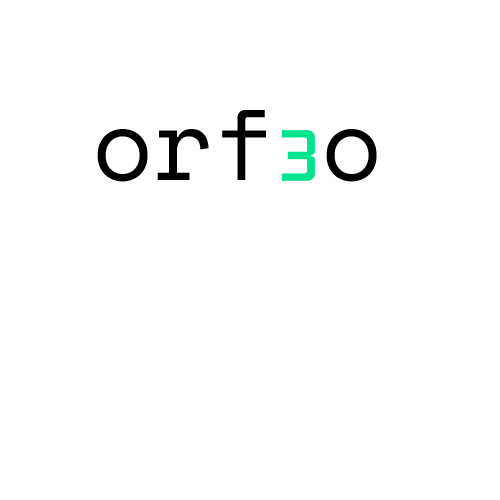
<style>
.page{position:relative;width:500px;height:500px;background:#ffffff}
.page>*{position:absolute;margin:0}
.t1{font:100px "SpaceMono-Regular";color:#000000}
</style>
<div class="page">
<p class="t1" style="left:97px;top:110px;width:169px;height:72px">orf</p>
<p class="t1" style="left:326px;top:129px;width:51px;height:53px">o</p>
</div>
